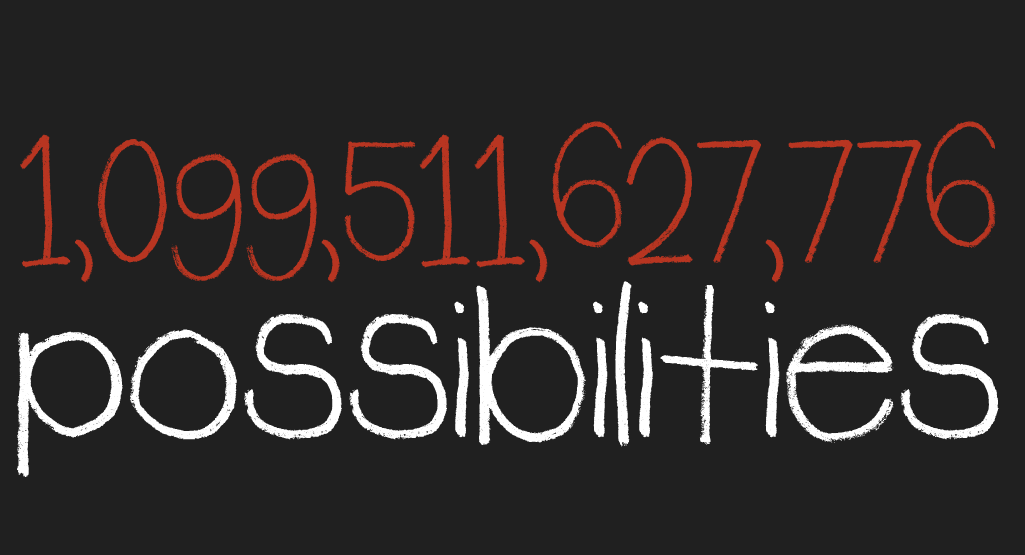
<style>
.page{position:relative;width:1025px;height:555px;background:#202020}
.page>*{position:absolute;margin:0}
.t1{font:166.7px/191.7px "Rudiment";color:#b83521}
.t2{font:258.3px/191.7px "Rudiment";color:#ffffff}
</style>
<div class="page">
<p class="t1" style="left:17px;top:121px;width:982px;height:356px;text-align:center">1,099,511,627,776<br><span class="t2">possibilities</span></p>
</div>
